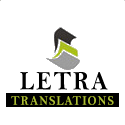
<style>
.page{position:relative;width:125px;height:125px;background:#ffffff}
.page>*{position:absolute;margin:0}
.t1{font:26.7px "BellMTBold";letter-spacing:0.08em;color:#000000;scale:0.88 1}
.t2{font:13.3px "BellMTBold";letter-spacing:0.08em;color:#adbe34;scale:0.88 1}
</style>
<div class="page">
<p class="t1" style="left:20px;top:72px;width:88px;height:18px">LETRA</p>
<p class="t2" style="left:11px;top:96px;width:103px;height:9px">TRANSLATIONS</p>
</div>
